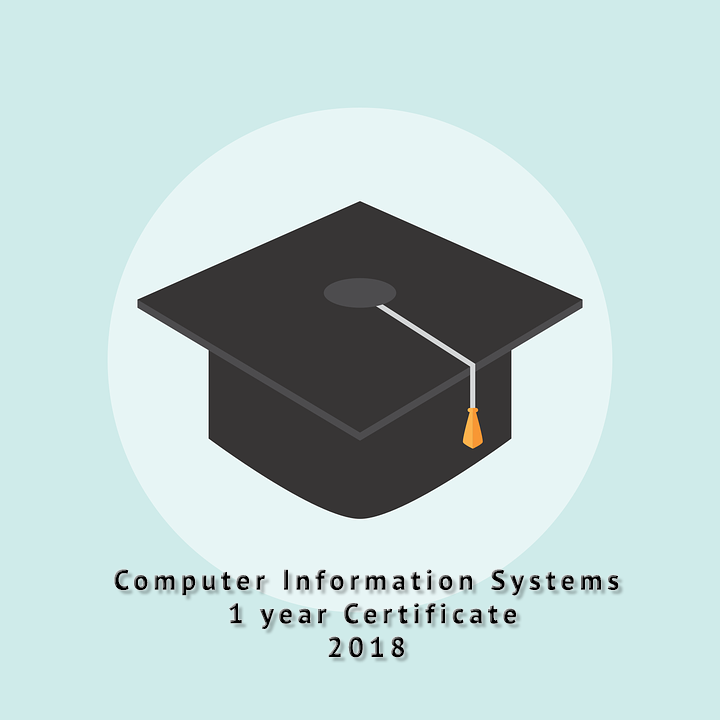
<style>
.page{position:relative;width:720px;height:720px;background:#cfebea}
.page>*{position:absolute;margin:0}
.t1{font:28px "PTSans-Bold";letter-spacing:0.18em}
</style>
<div class="page">
<p class="t1" style="left:114px;top:569px;width:505px;height:89px;text-align:center">Computer Information Systems<br> 1 year Certificate<br>2018</p>
</div>
